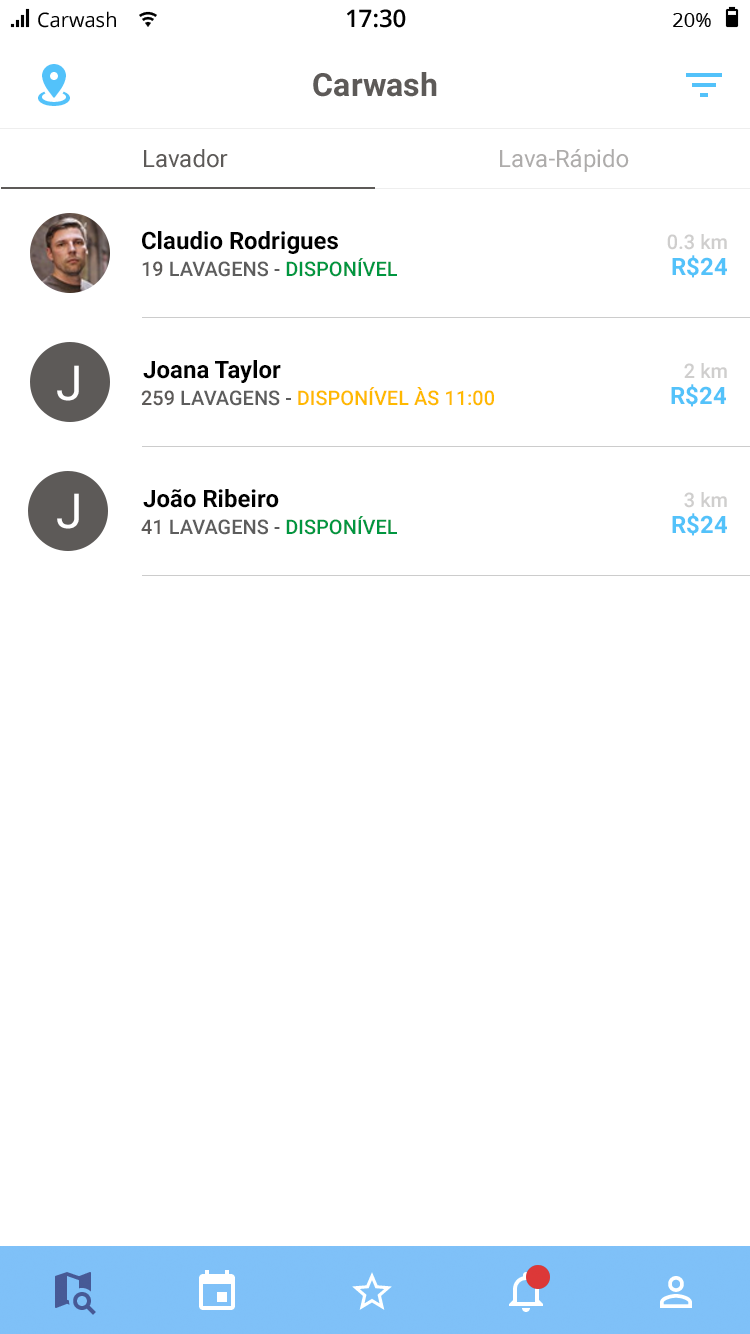
<style>
.page{position:relative;width:750px;height:1334px;background:#ffffff}
.page>*{position:absolute;margin:0}
.t1{font:24px "Roboto-Bold";color:#000000}
.t2{font:20px "Roboto-Medium";color:#cfcecd}
.t3{font:24px "Roboto-Bold";color:#53c2fa}
.t4{font:20px "Roboto-Medium";color:#5d5d5d;text-transform:uppercase}
.t5{font:20px "Roboto-Medium";color:#5d5a58;text-transform:uppercase}
.t6{font:20px "Roboto-Medium";color:#009640;text-transform:uppercase}
.t7{font:48px "Roboto-Regular";color:#ffffff}
.t8{font:20px "Roboto-Medium";color:#ffb900;text-transform:uppercase}
</style>
<div class="page">
<p class="t1" style="left:142px;top:231px;width:196px;height:23px">Claudio Rodrigues</p>
<p class="t2" style="left:667px;top:234px;width:60px;height:16px">0.3 km</p>
<p class="t3" style="left:672px;top:255px;width:55px;height:23px">R$24</p>
<p class="t4" style="left:142px;top:258px;width:255px;height:19px"><span class="t5">19 </span>Lavagens - <span class="t6">Disponível</span></p>
<p class="t7" style="left:57px;top:365px;width:22px;height:36px">J</p>
<p class="t1" style="left:143px;top:360px;width:138px;height:23px">Joana Taylor</p>
<p class="t2" style="left:684px;top:363px;width:43px;height:15px">2 km</p>
<p class="t8" style="left:141px;top:387px;width:353px;height:19px"><span class="t5">259 </span><span class="t4">Lavagens - </span>Disponível às 11:00</p>
<p class="t3" style="left:671px;top:384px;width:55px;height:23px">R$24</p>
<p class="t7" style="left:57px;top:493px;width:22px;height:36px">J</p>
<p class="t1" style="left:143px;top:489px;width:136px;height:19px">João Ribeiro</p>
<p class="t2" style="left:684px;top:492px;width:43px;height:16px">3 km</p>
<p class="t4" style="left:141px;top:516px;width:256px;height:19px"><span class="t5">41 </span>Lavagens - <span class="t6">Disponível</span></p>
<p class="t3" style="left:672px;top:513px;width:55px;height:23px">R$24</p>
</div>
